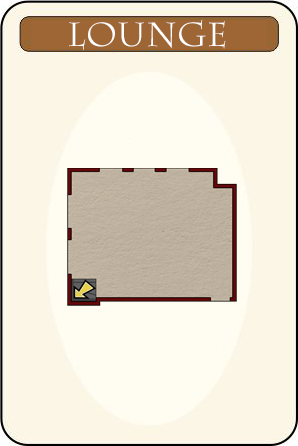
<style>
.page{position:relative;width:298px;height:446px;background:#fcf6e6}
.page>*{position:absolute;margin:0}
.t1{font:33.3px "CharlemagneStd-Regular";color:#ffffff}
</style>
<div class="page">
<p class="t1" style="left:69px;top:19px;width:157px;height:32px">Lounge</p>
</div>
